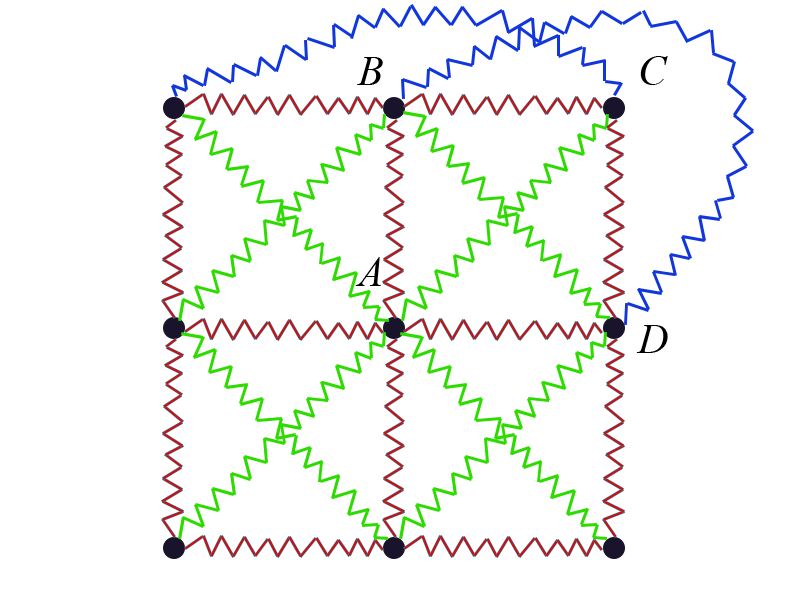
<style>
.page{position:relative;width:800px;height:600px;background:#ffffff}
.page>*{position:absolute;margin:0}
.t1{font:72px "TimesNewRomanPS-ItalicMT";color:#000000}
</style>
<div class="page">
<p class="t1" style="left:357px;top:57px;width:26px;height:28px">B</p>
<p class="t1" style="left:640px;top:56px;width:28px;height:29px">C</p>
<p class="t1" style="left:355px;top:257px;width:26px;height:29px">A</p>
<p class="t1" style="left:636px;top:325px;width:32px;height:28px">D</p>
</div>
